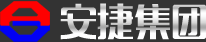
<style>
.page{position:relative;width:206px;height:42px;background:#333333}
.page>*{position:absolute;margin:0}
.t1{font:37.3px "MFLangQian_Noncommercial-Regular"}
</style>
<div class="page">
<p class="t1" style="left:60px;top:3px;width:147px;height:37px">安捷集团</p>
</div>
